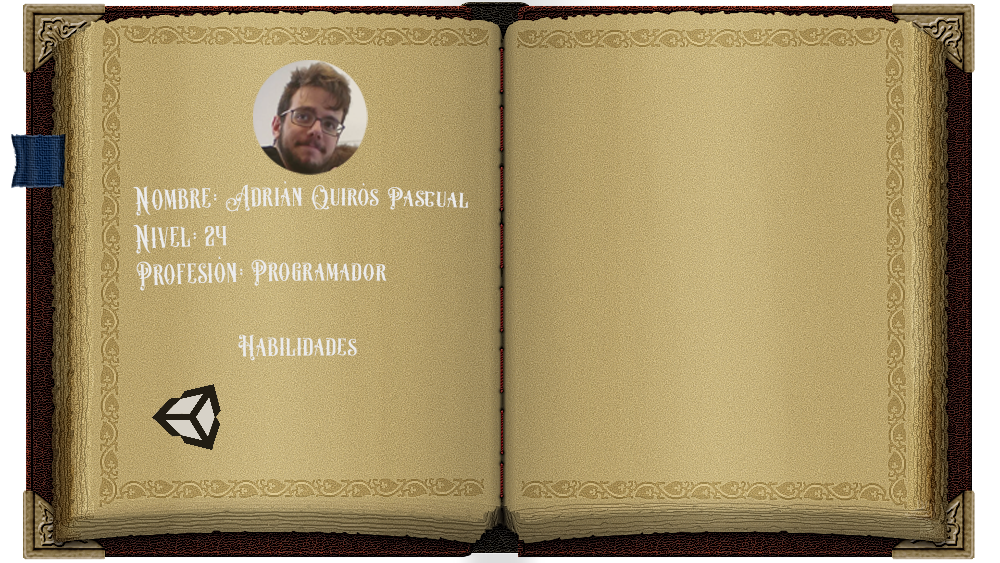
<style>
.page{position:relative;width:1000px;height:563px}
.page>*{position:absolute;margin:0}
.t1{font:36px "DemonBlade";color:#ebebeb}
</style>
<div class="page">
<p class="t1" style="left:133px;top:181px;width:336px;height:35px">Nombre: Adrián Quirós Pascual</p>
<p class="t1" style="left:133px;top:224px;width:94px;height:30px">Nivel: 24</p>
<p class="t1" style="left:136px;top:256px;width:251px;height:35px">Profesión: Programador</p>
<p class="t1" style="left:238px;top:334px;width:119px;height:27px">Habilidades</p>
</div>
